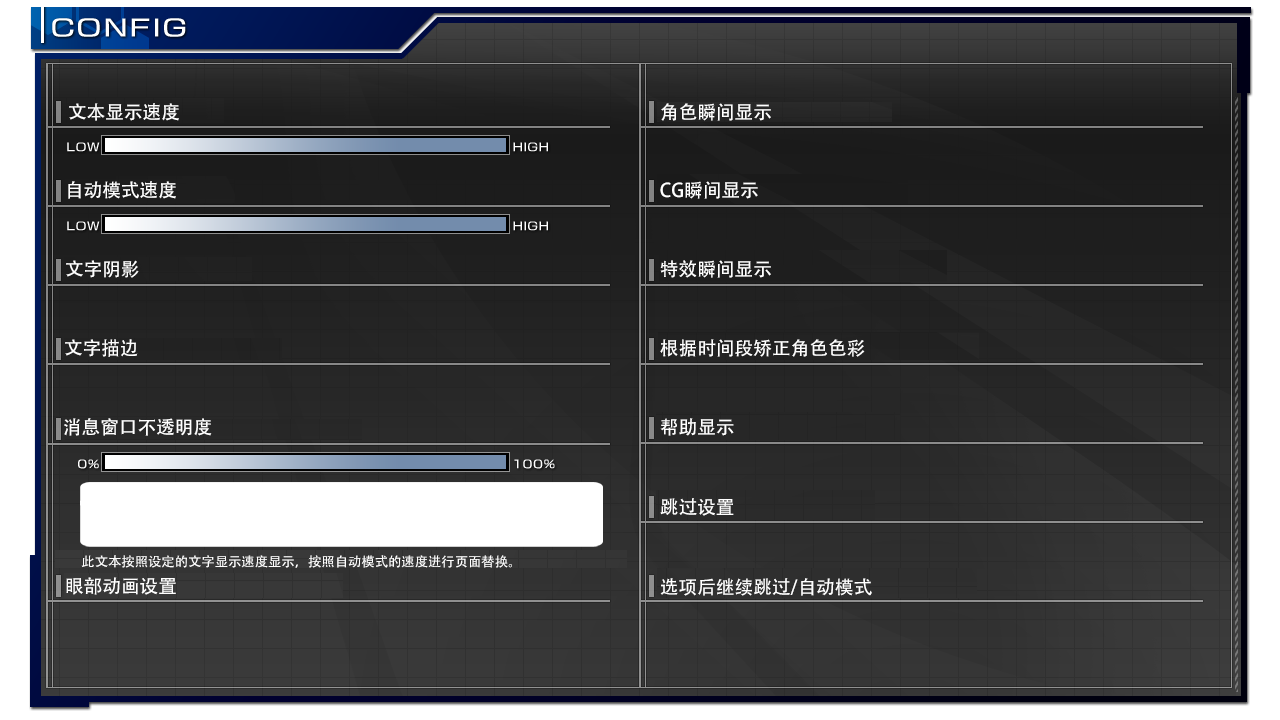
<style>
.page{position:relative;width:1280px;height:720px}
.page>*{position:absolute;margin:0}
.t1{font:18.7px "AdobeHeitiStd-Regular";color:#ffffff}
.t2{font:13.3px "AdobeHeitiStd-Regular";color:#ffffff}
</style>
<div class="page">
<p class="t1" style="left:69px;top:103px;width:110px;height:18px">文本显示速度</p>
<p class="t1" style="left:661px;top:103px;width:110px;height:18px">角色瞬间显示</p>
<p class="t1" style="left:68px;top:181px;width:108px;height:18px">自动模式速度</p>
<p class="t1" style="left:660px;top:181px;width:98px;height:18px">CG瞬间显示</p>
<p class="t1" style="left:66px;top:260px;width:73px;height:18px">文字阴影</p>
<p class="t1" style="left:660px;top:260px;width:111px;height:18px">特效瞬间显示</p>
<p class="t1" style="left:65px;top:339px;width:73px;height:18px">文字描边</p>
<p class="t1" style="left:660px;top:339px;width:205px;height:18px">根据时间段矫正角色色彩</p>
<p class="t1" style="left:64px;top:418px;width:148px;height:18px">消息窗口不透明度</p>
<p class="t1" style="left:660px;top:418px;width:74px;height:18px">帮助显示</p>
<p class="t1" style="left:660px;top:498px;width:74px;height:18px">跳过设置</p>
<p class="t2" style="left:81px;top:555px;width:431px;height:13px">此文本按照设定的文字显示速度显示，按照自动模式的速度进行页面替换。</p>
<p class="t1" style="left:66px;top:577px;width:110px;height:18px">眼部动画设置</p>
<p class="t1" style="left:660px;top:578px;width:212px;height:18px">选项后继续跳过/自动模式</p>
</div>
